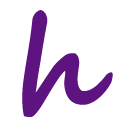
<style>
.page{position:relative;width:128px;height:128px;background:#ffffff}
.page>*{position:absolute;margin:0}
.t1{font:128px "SegoeScript-Bold";color:#5d1380}
</style>
<div class="page">
<p class="t1" style="left:22px;top:10px;width:91px;height:107px">h</p>
</div>
